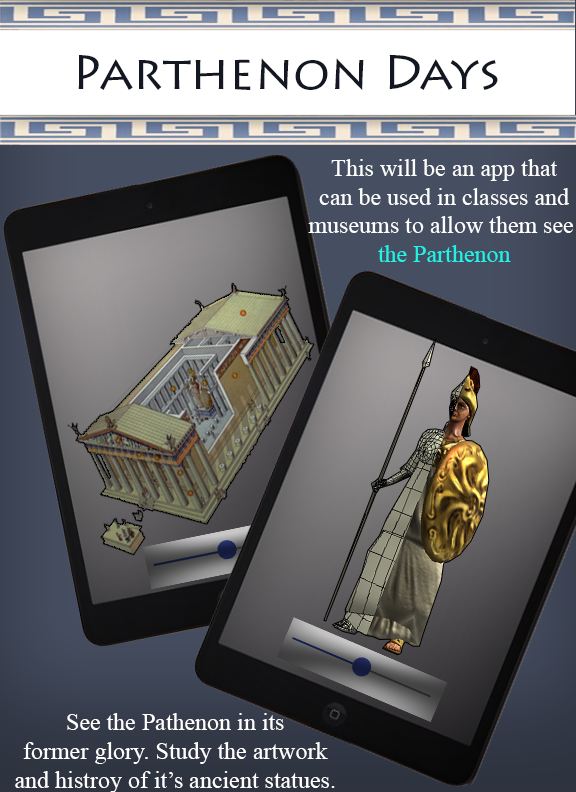
<style>
.page{position:relative;width:576px;height:792px}
.page>*{position:absolute;margin:0}
.t1{font:48px "LithosPro-Regular";color:#131721}
.t2{font:24px "TimesNewRomanPSMT";color:#fefefe}
.t3{font:24px "TimesNewRomanPSMT";color:#1ef3e6}
.t4{font:24px "TimesNewRomanPSMT";color:#ffffff}
</style>
<div class="page">
<p class="t1" style="left:78px;top:55px;width:420px;height:35px">Parthenon Days</p>
<p class="t2" style="left:308px;top:159px;width:265px;height:103px;text-align:center">This will be an app that<br> can be used in classes and <br>museums to allow them see <br><span class="t3">the Parthenon</span></p>
<p class="t4" style="left:15px;top:713px;width:320px;height:80px;text-align:center">See the Pathenon in its<br>former glory. Study the artwork<br>and histroy of it’s ancient statues.</p>
</div>
